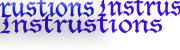
<style>
.page{position:relative;width:180px;height:50px;background:#ffffff}
.page>*{position:absolute;margin:0}
.t1{font:25.1px "LucidaBlackletter";scale:1.22 1}
</style>
<div class="page">
<p class="t1" style="left:0px;top:11px;width:162px;height:23px">Instrustions</p>
</div>
